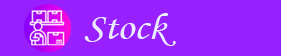
<style>
.page{position:relative;width:281px;height:56px;background:#9820ff}
.page>*{position:absolute;margin:0}
.t1{font:37.5px "MonotypeCorsiva";color:#edeafe;scale:1.12 1}
</style>
<div class="page">
<p class="t1" style="left:84px;top:13px;width:92px;height:33px">Stock</p>
</div>
